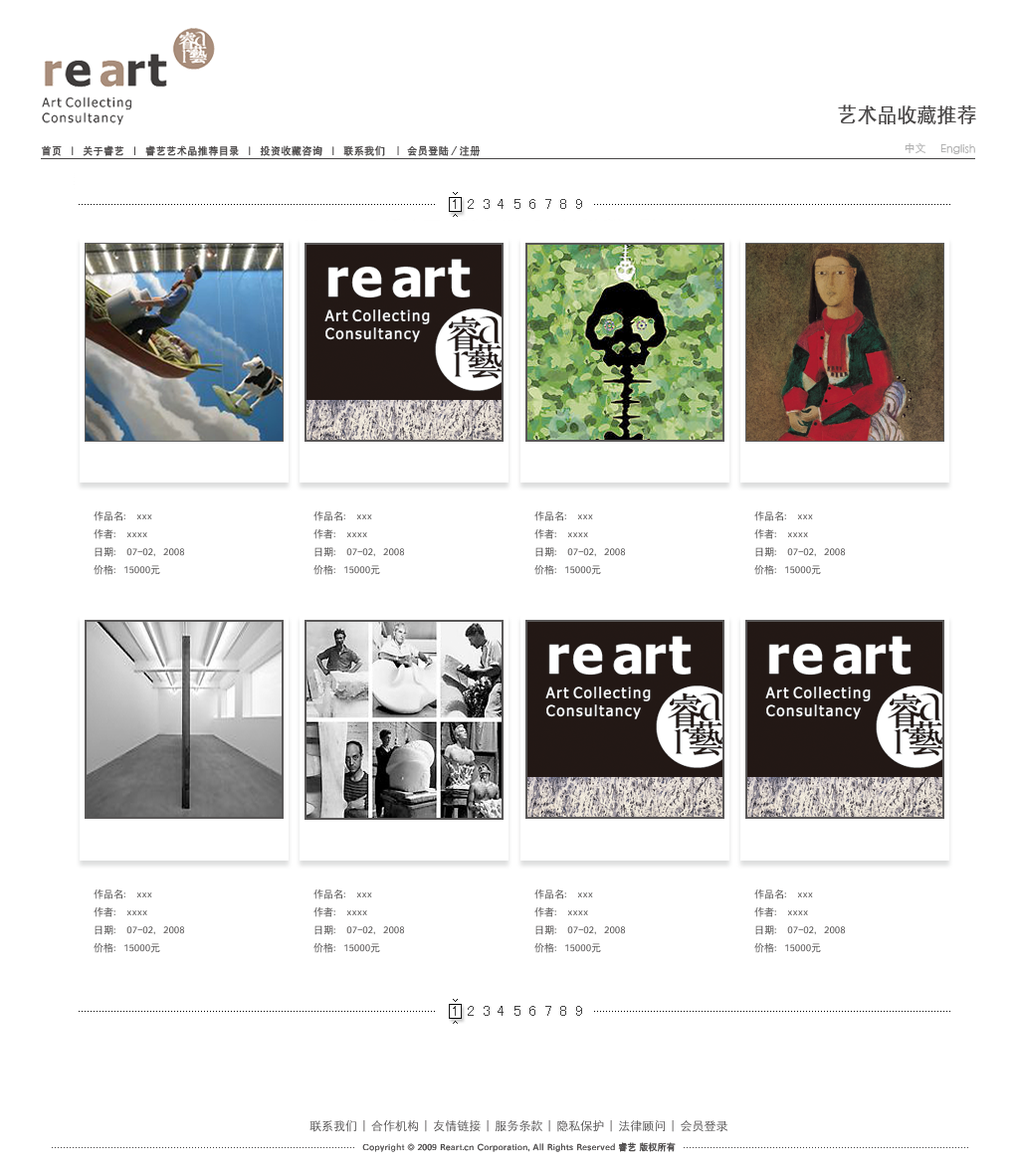
<style>
.page{position:relative;width:1019px;height:1170px;background:#ffffff}
.page>*{position:absolute;margin:0}
.t1{font:14.9px "SimHei";letter-spacing:0.5em;color:#434343}
.t2{font:10px/17.9px "SIL-Hei-Med-Jian";color:#5a5858}
</style>
<div class="page">
<p class="t1" style="left:453px;top:199px;width:129px;height:10px">123456789</p>
<p class="t2" style="left:94px;top:510px;width:90px;height:65px">作品名： xxx <br>作者： xxxx<br>日期： 07-02，2008<br>价格：15000元</p>
<p class="t2" style="left:313px;top:510px;width:91px;height:65px">作品名： xxx <br>作者： xxxx<br>日期： 07-02，2008<br>价格：15000元</p>
<p class="t2" style="left:534px;top:510px;width:91px;height:65px">作品名： xxx <br>作者： xxxx<br>日期： 07-02，2008<br>价格：15000元</p>
<p class="t2" style="left:754px;top:510px;width:91px;height:65px">作品名： xxx <br>作者： xxxx<br>日期： 07-02，2008<br>价格：15000元</p>
<p class="t2" style="left:94px;top:889px;width:90px;height:64px">作品名： xxx <br>作者： xxxx<br>日期： 07-02，2008<br>价格：15000元</p>
<p class="t2" style="left:313px;top:889px;width:91px;height:64px">作品名： xxx <br>作者： xxxx<br>日期： 07-02，2008<br>价格：15000元</p>
<p class="t2" style="left:534px;top:889px;width:91px;height:64px">作品名： xxx <br>作者： xxxx<br>日期： 07-02，2008<br>价格：15000元</p>
<p class="t2" style="left:754px;top:889px;width:91px;height:64px">作品名： xxx <br>作者： xxxx<br>日期： 07-02，2008<br>价格：15000元</p>
<p class="t1" style="left:453px;top:1006px;width:129px;height:10px">123456789</p>
</div>
